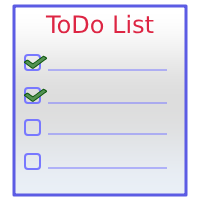
<style>
.page{position:relative;width:200px;height:200px}
.page>*{position:absolute;margin:0}
.t1{font:24px "DejaVuSans";color:#dd2543}
</style>
<div class="page">
<p class="t1" style="left:45px;top:14px;width:109px;height:20px">ToDo List</p>
</div>
